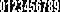
<style>
.page{position:relative;width:60px;height:12px;background:#ffffff}
.page>*{position:absolute;margin:0}
.t1{font:16.8px "ArialNarrow-Bold";color:#ffffff;scale:0.83 1}
</style>
<div class="page">
<p class="t1" style="left:0px;top:0px;width:59px;height:12px">0123456789</p>
</div>
